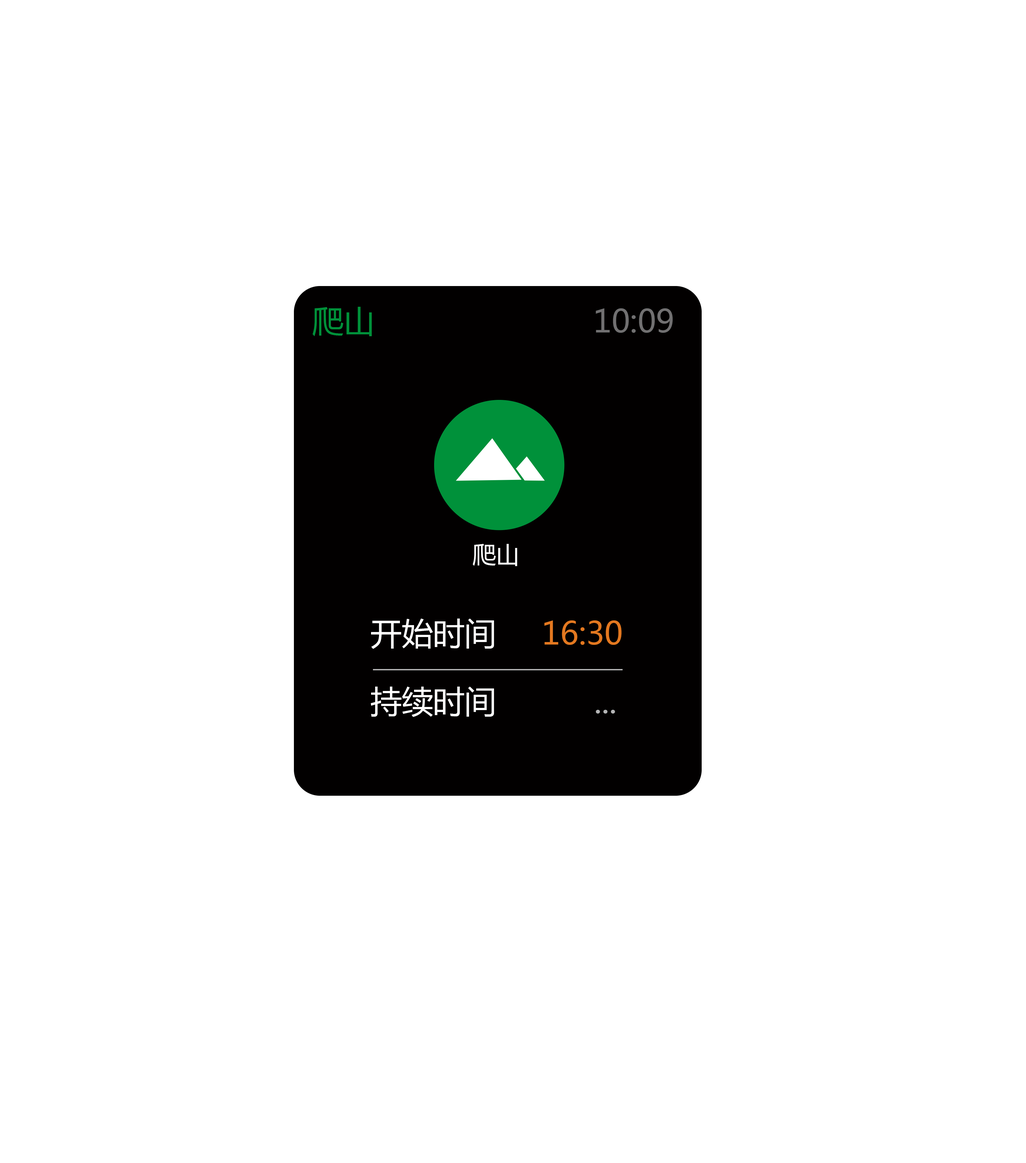
<style>
.page{position:relative;width:1026px;height:1163px;background:#ffffff}
.page>*{position:absolute;margin:0}
.t1{font:31.4px "MicrosoftYaHei";color:#00913a}
.t2{font:31.4px "MicrosoftYaHei";color:#717071}
.t3{font:23.5px "MicrosoftYaHei";color:#ffffff}
.t4{font:31.4px "MicrosoftYaHei";color:#ffffff}
.t5{font:31.4px "MicrosoftYaHei";color:#e37820}
.t6{font:31.4px "MicrosoftYaHei";color:#b4b4b5}
</style>
<div class="page">
<p class="t1" style="left:312px;top:307px;width:60px;height:29px">爬山</p>
<p class="t2" style="left:595px;top:308px;width:78px;height:25px">10:09</p>
<p class="t3" style="left:473px;top:544px;width:44px;height:22px">爬山</p>
<p class="t4" style="left:371px;top:618px;width:123px;height:31px">开始时间</p>
<p class="t5" style="left:544px;top:620px;width:77px;height:25px">16:30</p>
<p class="t4" style="left:371px;top:686px;width:123px;height:31px">持续时间</p>
<p class="t6" style="left:595px;top:710px;width:20px;height:3px">...</p>
</div>
